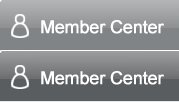
<style>
.page{position:relative;width:179px;height:102px}
.page>*{position:absolute;margin:0}
.t1{font:17.7px "ArialMT";letter-spacing:-0.025em;color:#ffffff;font-weight:bold}
</style>
<div class="page">
<p class="t1" style="left:41px;top:20px;width:123px;height:14px">Member Center</p>
<p class="t1" style="left:41px;top:71px;width:123px;height:14px">Member Center</p>
</div>
